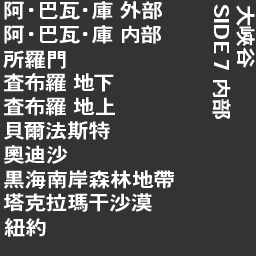
<style>
.page{position:relative;width:256px;height:256px;background:#333333}
.page>*{position:absolute;margin:0}
.t1{font:20px "HeiseiKakuGoStd-W7";color:#ffffff;scale:1.09 1}
</style>
<div class="page">
<p class="t1" style="left:4px;top:1px;width:158px;height:19px">阿・巴瓦・庫 外部</p>
<p class="t1" style="left:212px;top:4px;width:19px;height:115px;rotate:90deg">SIDE 7 内部</p>
<p class="t1" style="left:236px;top:5px;width:19px;height:63px;rotate:90deg">大峽谷</p>
<p class="t1" style="left:4px;top:25px;width:157px;height:19px">阿・巴瓦・庫 内部</p>
<p class="t1" style="left:3px;top:50px;width:63px;height:19px">所羅門</p>
<p class="t1" style="left:3px;top:73px;width:111px;height:19px">査布羅 地下</p>
<p class="t1" style="left:3px;top:97px;width:112px;height:19px">査布羅 地上</p>
<p class="t1" style="left:4px;top:121px;width:106px;height:19px">貝爾法斯特</p>
<p class="t1" style="left:4px;top:145px;width:64px;height:19px">奧迪沙</p>
<p class="t1" style="left:4px;top:170px;width:171px;height:19px">黒海南岸森林地帶</p>
<p class="t1" style="left:3px;top:193px;width:149px;height:19px">塔克拉瑪干沙漠</p>
<p class="t1" style="left:4px;top:218px;width:42px;height:19px">紐約</p>
</div>
